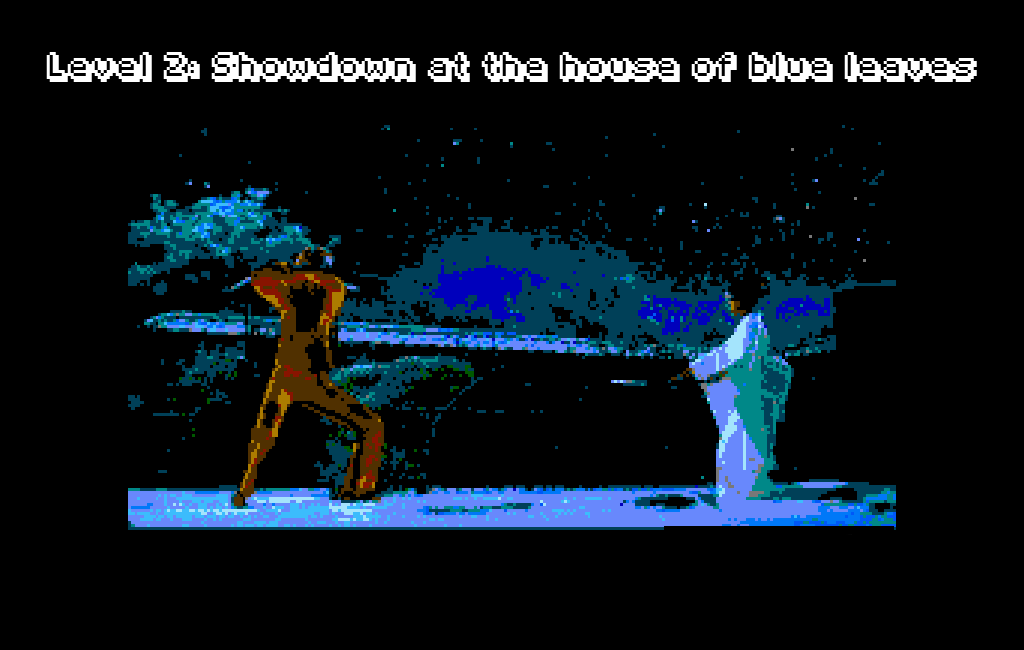
<style>
.page{position:relative;width:1024px;height:650px;background:#000000}
.page>*{position:absolute;margin:0}
.t1{font:24px "Fipps-Regular";color:#ffffff}
</style>
<div class="page">
<p class="t1" style="left:46px;top:52px;width:931px;height:30px">Level 2: Showdown at the house of blue leaves</p>
</div>
